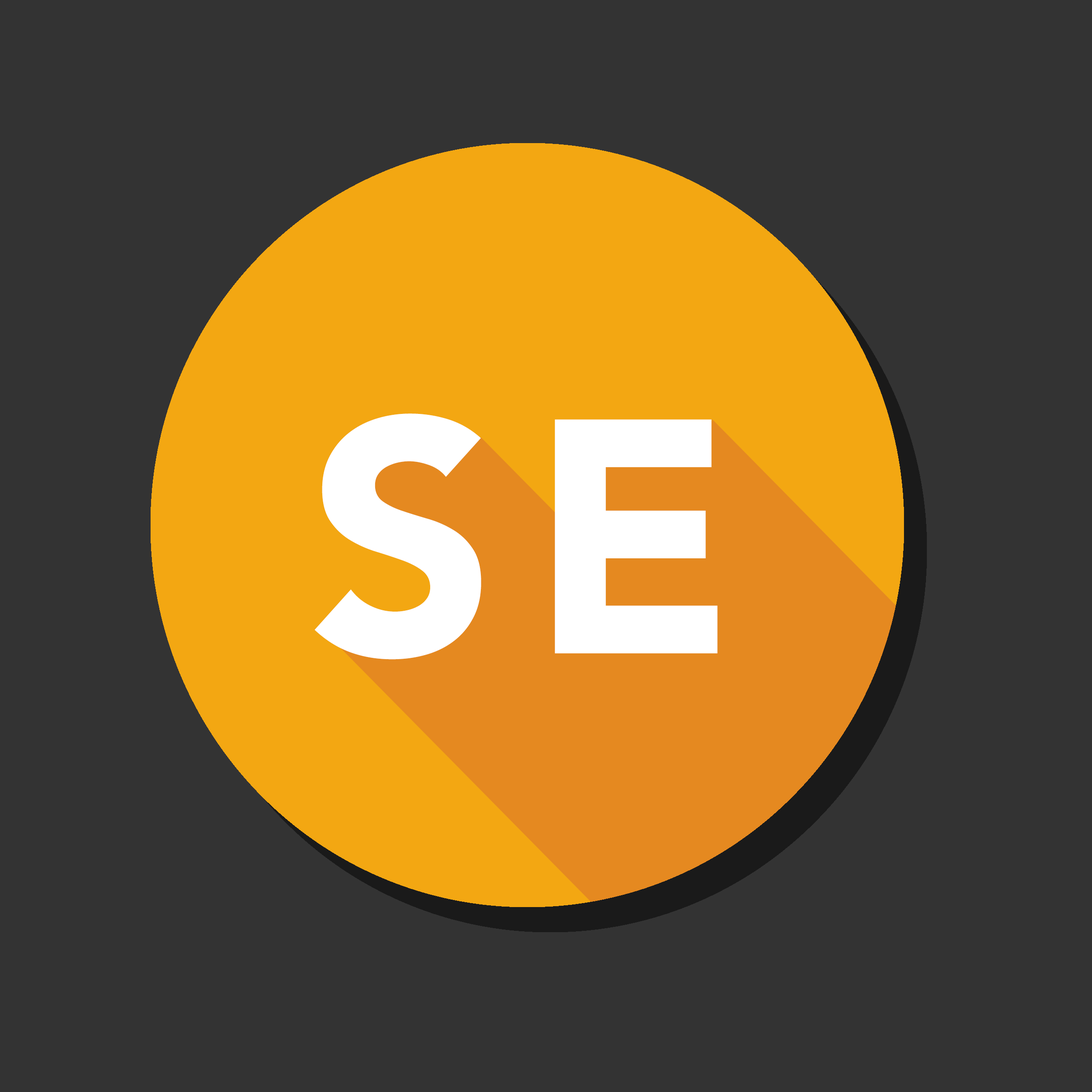
<style>
.page{position:relative;width:1092px;height:1092px;background:#333333}
.page>*{position:absolute;margin:0}
.t1{font:330px "Avenir-Black";letter-spacing:0.105em;color:#ffffff}
.t2{font:324.2px "Avenir-Black";letter-spacing:0.105em;color:#ffffff}
</style>
<div class="page">
<p class="t1" style="left:314px;top:413px;width:404px;height:247px">SE</p>
<p class="t2" style="left:323px;top:418px;width:405px;height:230px">TE</p>
</div>
